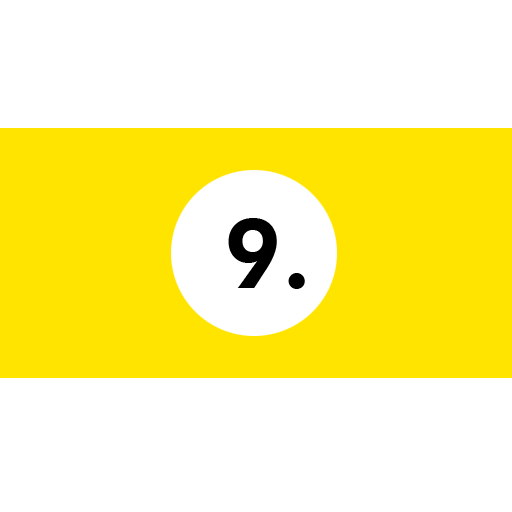
<style>
.page{position:relative;width:512px;height:512px;background:#ffffff}
.page>*{position:absolute;margin:0}
.t1{font:96px "FuturaBT-Heavy";color:#000000}
</style>
<div class="page">
<p class="t1" style="left:228px;top:218px;width:77px;height:71px">9.</p>
</div>
